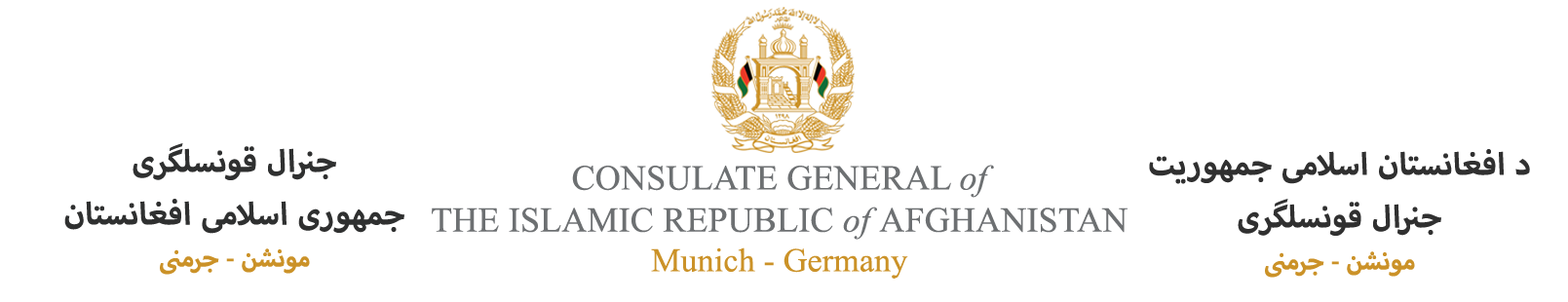
<style>
.page{position:relative;width:1568px;height:302px;background:#ffffff}
.page>*{position:absolute;margin:0}
.t1{font:43.9px "MyriadArabic-Bold";letter-spacing:0.005em;color:#2f3030}
.t2{font:35.1px "MyriadArabic-Bold";letter-spacing:0.005em;color:#cb9228}
.t3{font:43.9px "MyriadArabic-Bold";letter-spacing:0.005em;color:#303030}
.t4{font:35.1px "TimesNewRomanPSMT";letter-spacing:0.005em;color:#6d7072}
.t5{font:35.1px "TimesNewRomanPS-ItalicMT";letter-spacing:0.005em;color:#6d7072}
.t6{font:33.1px "TimesNewRomanPSMT";letter-spacing:0.005em;color:#cb9228}
</style>
<div class="page">
<p class="t1" style="left:64px;top:143px;width:340px;height:132px;text-align:center">جنرال قونسلگری<br>جمهوری اسلامی افغانستان<br><span class="t2">مونشن - جرمنی</span></p>
<p class="t3" style="left:1149px;top:149px;width:381px;height:129px;text-align:center">د افغانستان اسلامی جمهوریت<br>جنرال قونسلگری<br><span class="t2">مونشن - جرمنی</span></p>
<p class="t4" style="left:432px;top:165px;width:696px;height:114px;text-align:center">CONSULATE GENERAL <span class="t5">of<br></span>THE ISLAMIC REPUBLIC <span class="t5">of </span>AFGHANISTAN<br><span class="t6">Munich - Germany</span></p>
</div>
